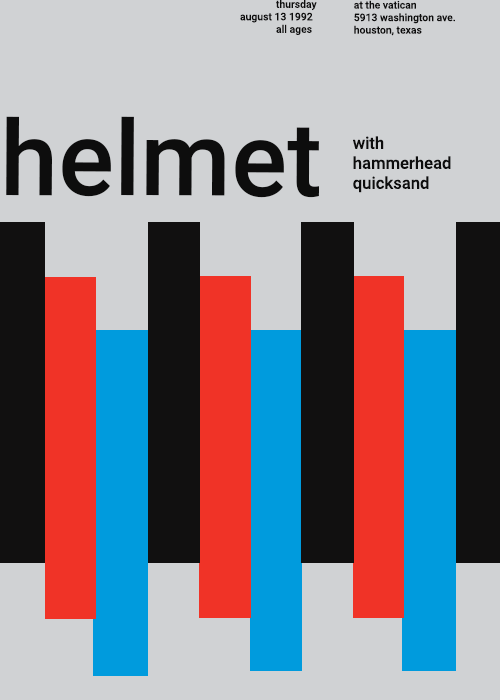
<style>
.page{position:relative;width:500px;height:700px;background:#d0d2d4}
.page>*{position:absolute;margin:0}
.t1{font:10.4px "Roboto-Medium";color:#0d0d0d}
.t2{font:104.2px "Roboto-Medium";color:#0d0d0d}
.t3{font:16.7px "Roboto-Medium";color:#0d0d0d}
</style>
<div class="page">
<p class="t1" style="left:240px;top:0px;width:77px;height:35px">thursday<br>august 13 1992<br> all ages</p>
<p class="t1" style="left:354px;top:0px;width:101px;height:36px">at the vatican<br>5913 washington ave.<br>houston, texas</p>
<p class="t2" style="left:6px;top:116px;width:313px;height:82px">helmet</p>
<p class="t3" style="left:353px;top:136px;width:98px;height:57px">with <br>hammerhead<br>quicksand</p>
</div>
